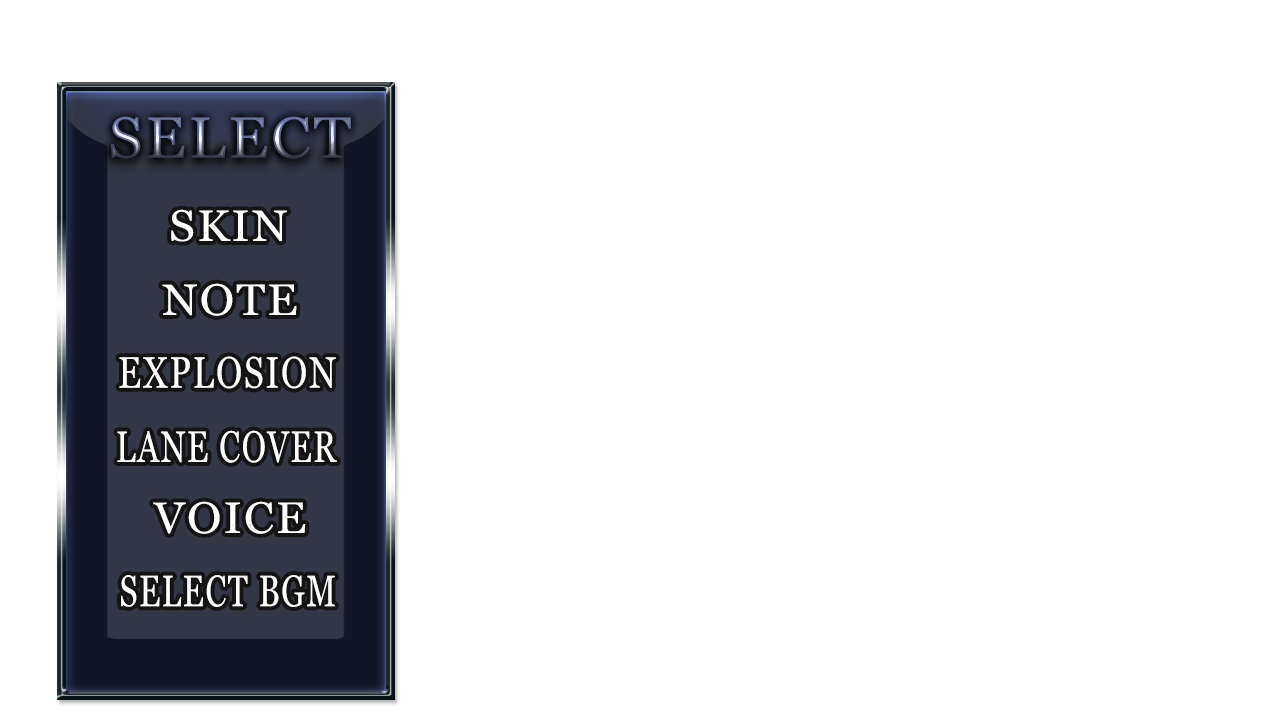
<style>
.page{position:relative;width:1280px;height:720px;background:#ffffff}
.page>*{position:absolute;margin:0}
.t1{font:58px "Vani";letter-spacing:0.05em;scale:1.05 1}
.t2{font:44px "Vani";letter-spacing:0.05em;color:#ffffff;scale:1.05 1}
.t3{font:44px "Vani";letter-spacing:0.05em;color:#ffffff;scale:0.8 1}
.t4{font:44px "Vani";letter-spacing:0.05em;color:#ffffff;scale:0.74 1}
.t5{font:44px "Vani";letter-spacing:0.05em;color:#ffffff;scale:0.73 1}
</style>
<div class="page">
<p class="t1" style="left:111px;top:116px;width:240px;height:43px">SELECT</p>
<p class="t2" style="left:171px;top:209px;width:116px;height:33px">SKIN</p>
<p class="t2" style="left:162px;top:283px;width:135px;height:33px">NOTE</p>
<p class="t3" style="left:119px;top:356px;width:217px;height:33px">EXPLOSION</p>
<p class="t4" style="left:117px;top:430px;width:220px;height:33px">LANE COVER</p>
<p class="t2" style="left:153px;top:501px;width:153px;height:33px">VOICE</p>
<p class="t5" style="left:121px;top:575px;width:214px;height:32px">SELECT BGM</p>
</div>
